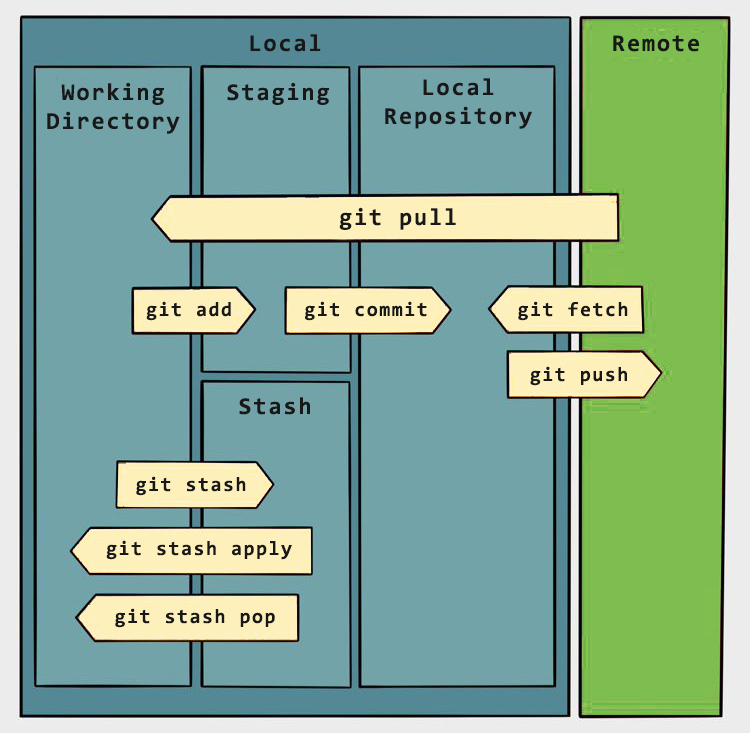
<style>
.page{position:relative;width:750px;height:733px;background:#72a3a8}
.page>*{position:absolute;margin:0}
.t1{font:24px "Consolas-Bold";letter-spacing:0.075em;color:#181818}
.t2{font:20px "Consolas-Bold";letter-spacing:0.075em;color:#181818}
</style>
<div class="page">
<p class="t1" style="left:250px;top:34px;width:71px;height:18px">Local</p>
<p class="t1" style="left:613px;top:35px;width:86px;height:17px">Remote</p>
<p class="t1" style="left:385px;top:78px;width:147px;height:51px;text-align:center">Local<br>Repository</p>
<p class="t1" style="left:47px;top:82px;width:133px;height:52px;text-align:center">Working<br>Directory</p>
<p class="t1" style="left:227px;top:82px;width:102px;height:23px">Staging</p>
<p class="t1" style="left:339px;top:207px;width:117px;height:23px">git pull</p>
<p class="t2" style="left:146px;top:301px;width:85px;height:20px">git add</p>
<p class="t2" style="left:305px;top:301px;width:122px;height:20px">git commit</p>
<p class="t2" style="left:518px;top:301px;width:110px;height:20px">git fetch</p>
<p class="t2" style="left:530px;top:366px;width:97px;height:20px">git push</p>
<p class="t1" style="left:239px;top:397px;width:71px;height:18px">Stash</p>
<p class="t2" style="left:136px;top:476px;width:110px;height:20px">git stash</p>
<p class="t2" style="left:106px;top:540px;width:186px;height:20px">git stash apply</p>
<p class="t2" style="left:115px;top:608px;width:160px;height:20px">git stash pop</p>
</div>
